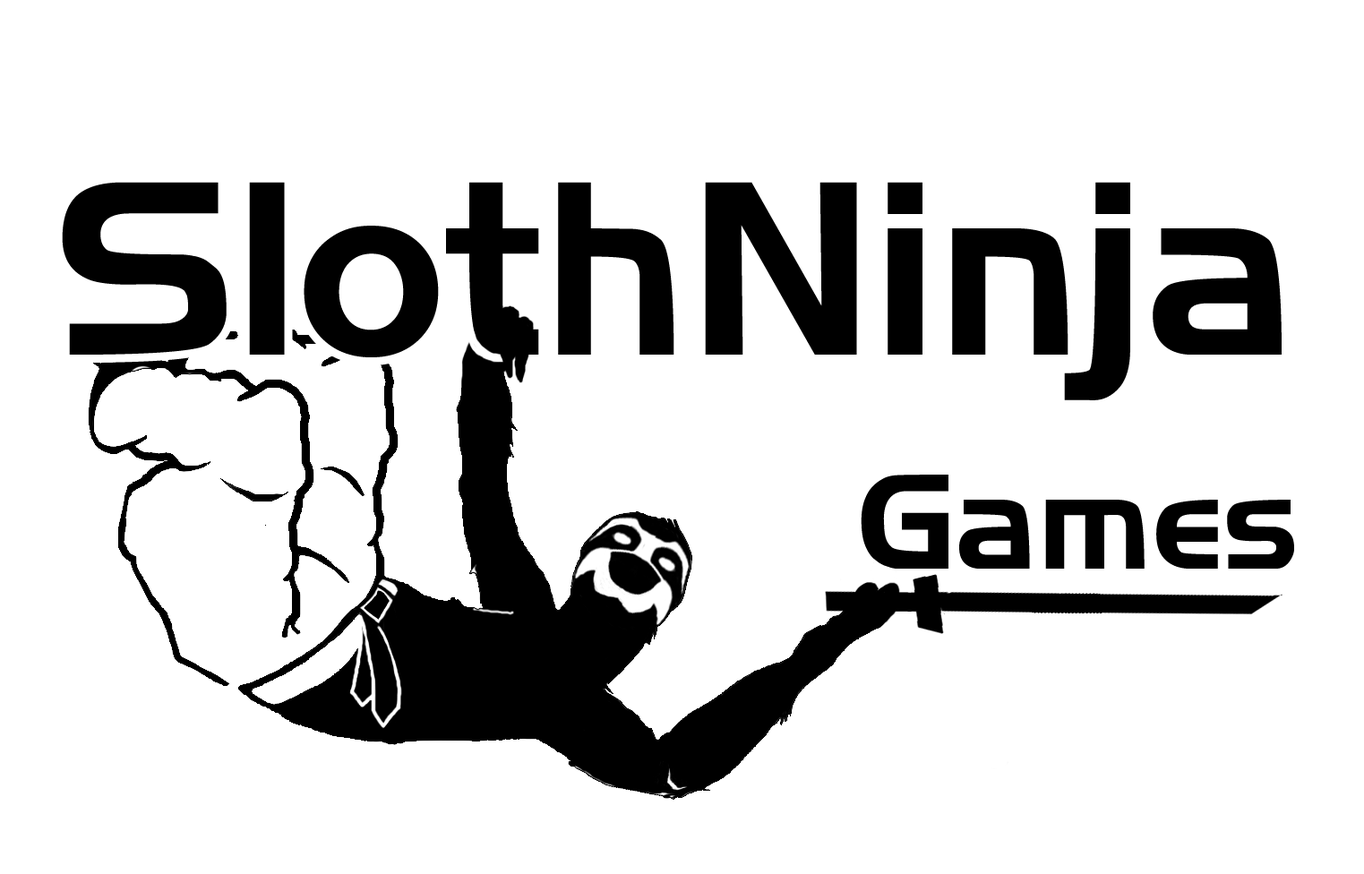
<style>
.page{position:relative;width:1364px;height:874px;background:#ffffff}
.page>*{position:absolute;margin:0}
.t1{font:239.5px "Newtown";color:#000000}
.t2{font:130.6px "Newtown";color:#000000}
</style>
<div class="page">
<p class="t1" style="left:62px;top:182px;width:1220px;height:218px">SlothNinja</p>
<p class="t2" style="left:861px;top:475px;width:433px;height:94px">Games</p>
</div>
